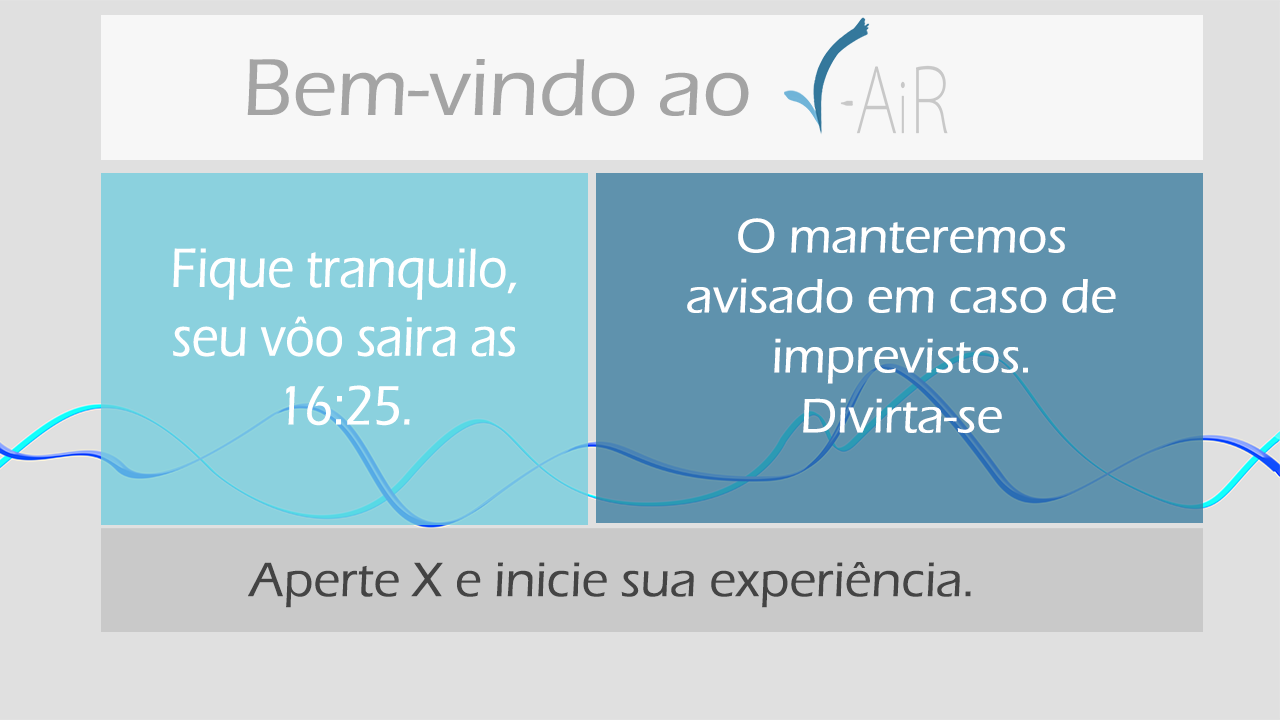
<style>
.page{position:relative;width:1280px;height:720px;background:#e0e0e0}
.page>*{position:absolute;margin:0}
.t1{font:83.3px "ErasITC-Medium";color:#a4a4a4}
.t2{font:50px "ErasITC-Medium";color:#ffffff}
.t3{font:57.3px "ErasITC-Medium";color:#ffffff;scale:0.87 1}
.t4{font:50px "ErasITC-Medium";color:#444444}
</style>
<div class="page">
<p class="t1" style="left:247px;top:59px;width:502px;height:57px">Bem-vindo ao</p>
<p class="t2" style="left:687px;top:218px;width:429px;height:215px;text-align:center">O manteremos avisado em caso de imprevistos. <br>Divirta-se</p>
<p class="t3" style="left:173px;top:248px;width:344px;height:178px;text-align:center">Fique tranquilo, seu vôo saira as 16:25.</p>
<p class="t4" style="left:248px;top:562px;width:723px;height:46px">Aperte X e inicie sua experiência.</p>
</div>
